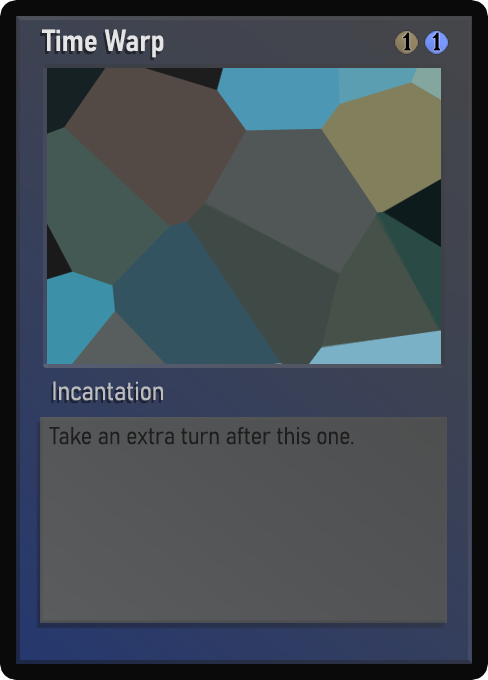
<style>
.page{position:relative;width:488px;height:680px}
.page>*{position:absolute;margin:0}
.t1{font:30px "Bahnschrift-SemiBoldSemiCondensed";color:#f2f2f2;font-weight:bold}
.t2{font:25px "WTRRoycroft";color:#000000;font-weight:bold;scale:1.09 1}
.t3{font:26px "Bahnschrift-LightSemiCondensed";color:#c8c8c8;font-weight:bold}
.t4{font:24px "Bahnschrift-LightSemiCondensed";color:#1e1e1e;font-weight:bold}
</style>
<div class="page">
<p class="t1" style="left:42px;top:29px;width:122px;height:29px;opacity:0.9">Time Warp</p>
<p class="t2" style="left:403px;top:32px;width:8px;height:19px">1</p>
<p class="t2" style="left:432px;top:32px;width:9px;height:19px">1</p>
<p class="t3" style="left:53px;top:381px;width:110px;height:20px;opacity:0.9">Incantation</p>
<p class="t4" style="left:49px;top:427px;width:305px;height:18px">Take an extra turn after this one.</p>
</div>
